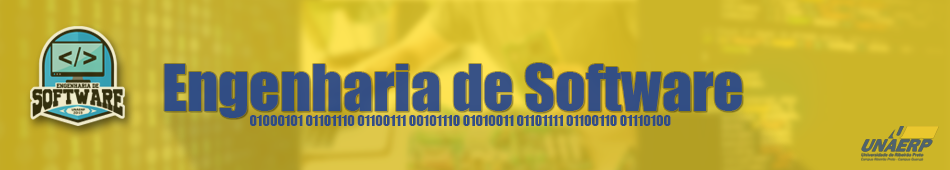
<style>
.page{position:relative;width:950px;height:170px}
.page>*{position:absolute;margin:0}
.t1{font:60px "Impact";color:#234688}
.t2{font:14px "Impact";color:#234688}
</style>
<div class="page">
<p class="t1" style="left:164px;top:63px;width:578px;height:55px;opacity:0.95">Engenharia de Software</p>
<p class="t2" style="left:250px;top:115px;width:421px;height:11px;opacity:0.95">01000101 01101110 01100111 00101110 01010011 01101111 01100110 01110100</p>
</div>
